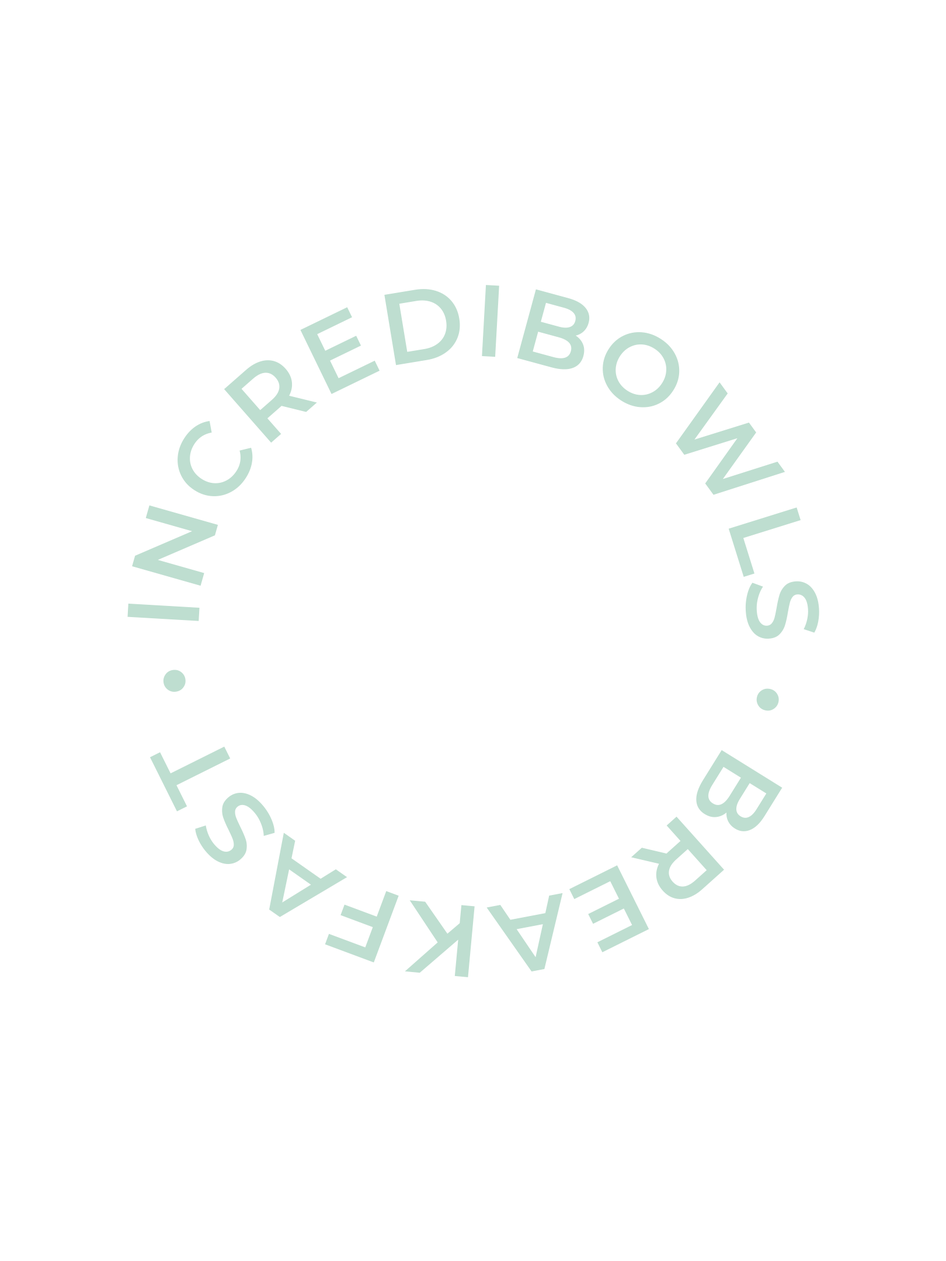
<style>
.page{position:relative;width:946px;height:1261px;background:#ffffff}
.page>*{position:absolute;margin:0}
.t1{font:101.7px/3.5px "Montserrat-SemiBold";letter-spacing:0.025em;color:#beded0}
</style>
<div class="page">
<p class="t1" style="left:127px;top:285px;width:692px;height:692px">INCREDIBOWLS • BREAKFAST •</p>
</div>
